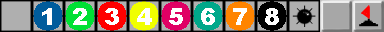
<style>
.page{position:relative;width:384px;height:32px}
.page>*{position:absolute;margin:0}
.t1{font:24px "Arial-Black";color:#ffffff}
</style>
<div class="page">
<p class="t1" style="left:42px;top:8px;width:237px;height:17px">1  2  3  4  5  6  7  8</p>
</div>
